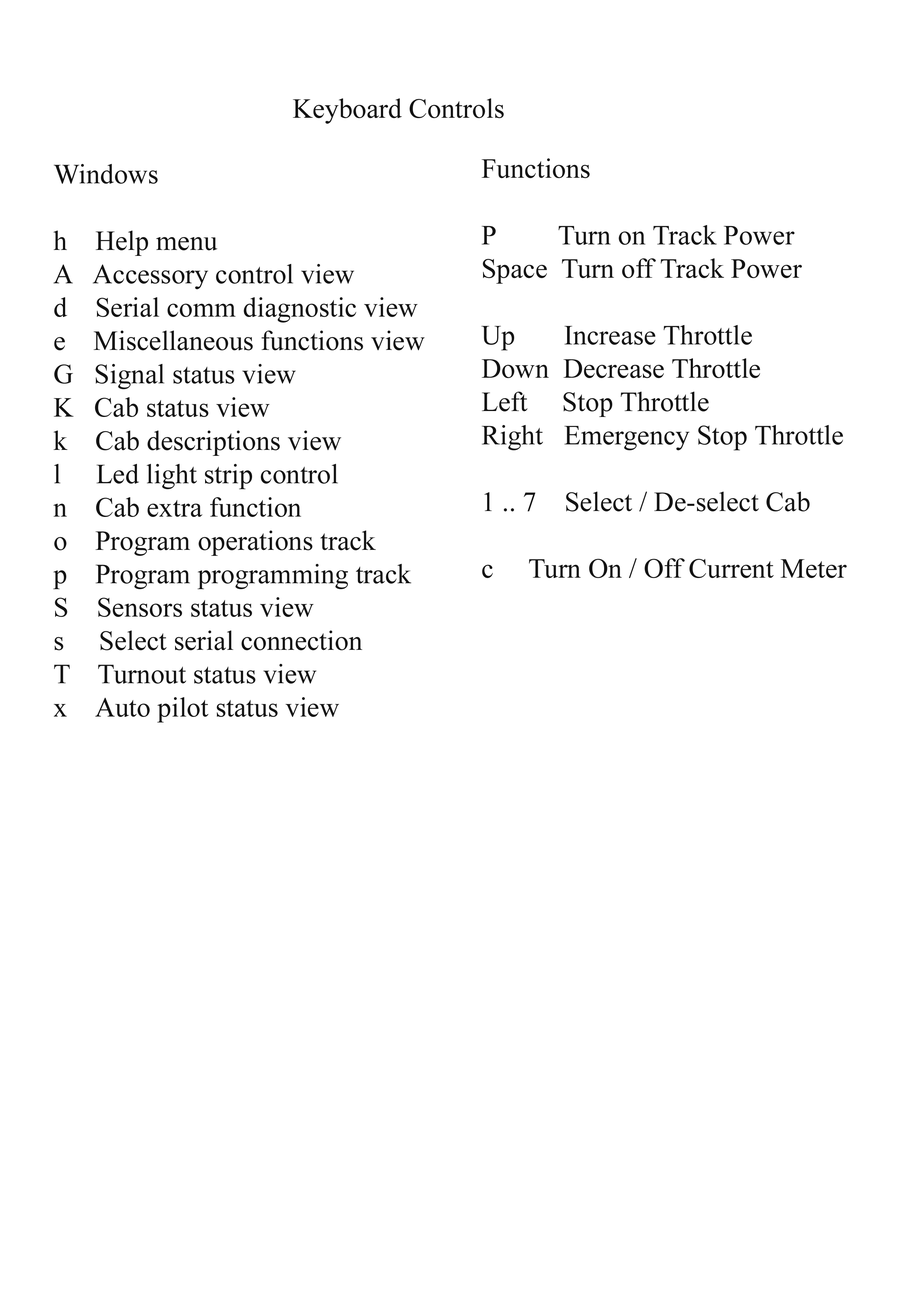
<style>
.page{position:relative;width:918px;height:1299px;background:#ffffff}
.page>*{position:absolute;margin:0}
.t1{font:27.8px "TimesNewRomanPSMT";color:#131313}
</style>
<div class="page">
<p class="t1" style="left:293px;top:98px;width:211px;height:26px">Keyboard Controls</p>
<p class="t1" style="left:481px;top:158px;width:366px;height:420px">Functions<br><br>P         Turn on Track Power<br>Space  Turn off Track Power<br><br>Up       Increase Throttle<br>Down  Decrease Throttle<br>Left     Stop Throttle<br>Right   Emergency Stop Throttle<br><br>1 .. 7    Select / De-select Cab<br><br>c     Turn On / Off Current Meter</p>
<p class="t1" style="left:53px;top:164px;width:372px;height:558px">Windows<br><br>h    Help menu<br>A   Accessory control view<br>d    Serial comm diagnostic view<br>e    Miscellaneous functions view<br>G   Signal status view<br>K   Cab status view<br>k    Cab descriptions view<br>l     Led light strip control<br>n    Cab extra function<br>o    Program operations track<br>p    Program programming track<br>S    Sensors status view<br>s     Select serial connection<br>T    Turnout status view<br>x    Auto pilot status view</p>
</div>
